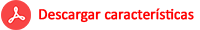
<style>
.page{position:relative;width:200px;height:30px;background:#ffffff}
.page>*{position:absolute;margin:0}
.t1{font:15.6px "Calibri";letter-spacing:-0.01em;color:#ff0000;font-weight:bold;scale:0.96 1}
</style>
<div class="page">
<p class="t1" style="left:39px;top:8px;width:155px;height:15px">Descargar características</p>
</div>
